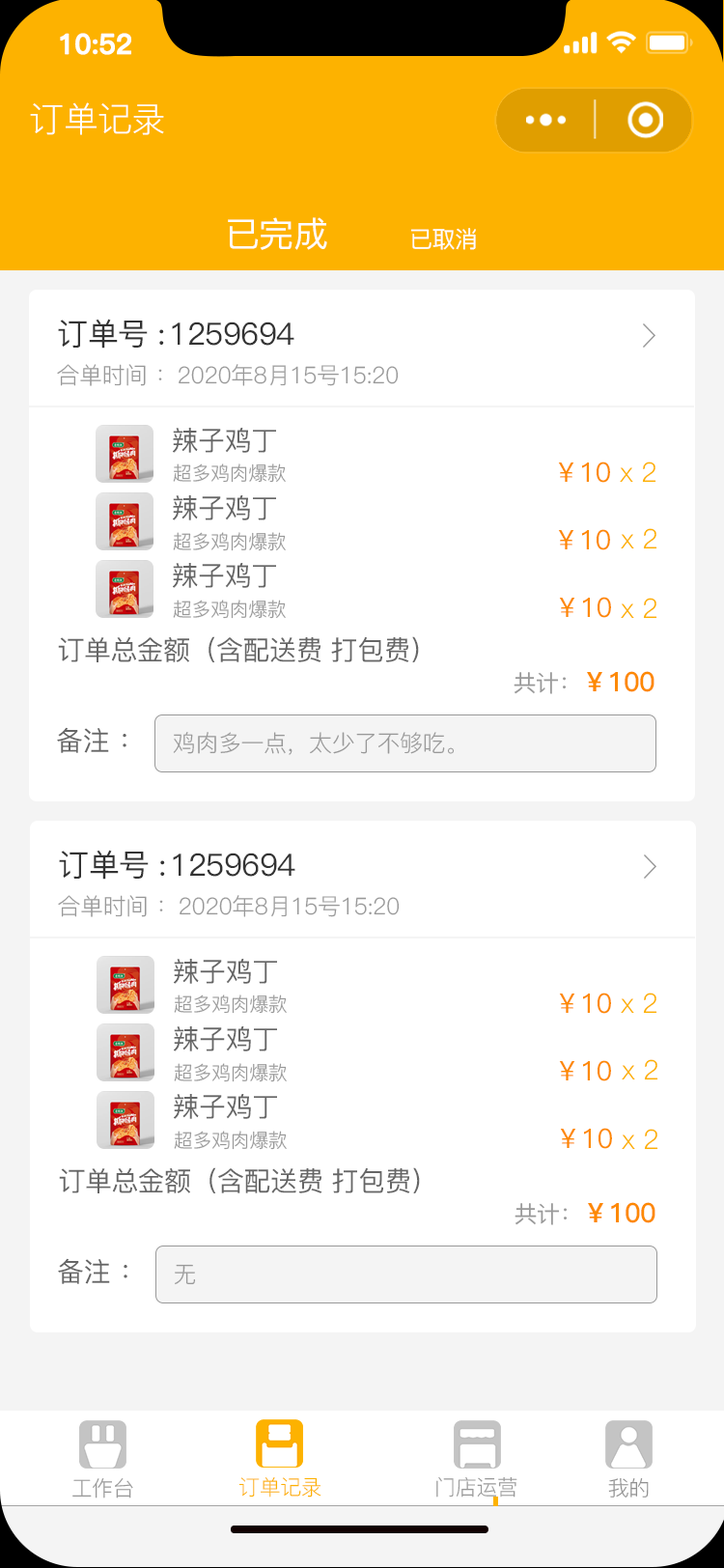
<style>
.page{position:relative;width:724px;height:1568px;background:#ffffff}
.page>*{position:absolute;margin:0}
.t1{font:27.5px "PingFang-SC-Bold";letter-spacing:-0.02em;color:#ffffff;font-weight:bold}
.t2{font:34.8px "PingFang-SC-Regular";letter-spacing:-0.02em;color:#ffffff}
.t3{font:34.8px "PingFang-SC-Medium";letter-spacing:-0.02em;color:#fefefe}
.t4{font:23.2px "PingFang-SC-Medium";letter-spacing:-0.02em;color:#fefefe}
.t5{font:30.9px "PingFang-SC-Medium";letter-spacing:-0.02em;color:#333333}
.t6{font:23.2px "PingFang-SC-Regular";letter-spacing:-0.02em;color:#999999}
.t7{font:27px "PingFang-SC-Medium";letter-spacing:-0.02em;color:#666666}
.t8{font:27px "PingFang-SC-Medium";letter-spacing:-0.02em;color:#fd8900}
.t9{font:27px "PingFang-SC-Regular";letter-spacing:-0.02em;color:#fdb100}
.t10{font:19.3px "PingFang-SC-Regular";letter-spacing:-0.02em;color:#999999}
.t11{font:27px "PingFang-SC-Bold";letter-spacing:-0.02em;color:#fd8900}
.t12{font:23.2px "PingFang-SC-Medium";letter-spacing:-0.02em;color:#999999}
.t13{font:21.2px "PingFang-SC-Regular";letter-spacing:-0.02em;color:#999999}
.t14{font:21.2px "PingFang-SC-Regular";letter-spacing:-0.02em;color:#fdb200}
.t15{font:21.2px "PingFang-SC-Regular";letter-spacing:-0.02em;color:#919191}
</style>
<div class="page">
<p class="t1" style="left:60px;top:33px;width:71px;height:22px">10:52</p>
<p class="t2" style="left:30px;top:102px;width:134px;height:33px">订单记录</p>
<p class="t3" style="left:228px;top:217px;width:99px;height:33px">已完成</p>
<p class="t4" style="left:410px;top:228px;width:66px;height:22px">已取消</p>
<p class="t5" style="left:58px;top:319px;width:106px;height:30px">订单号 :</p>
<p class="t5" style="left:172px;top:322px;width:122px;height:24px">1259694</p>
<p class="t6" style="left:57px;top:364px;width:342px;height:22px">合单时间 ：2020年8月15号15:20</p>
<p class="t7" style="left:173px;top:428px;width:103px;height:25px">辣子鸡丁</p>
<p class="t8" style="left:558px;top:462px;width:52px;height:21px">￥10</p>
<p class="t9" style="left:620px;top:462px;width:37px;height:21px">x 2</p>
<p class="t10" style="left:173px;top:463px;width:113px;height:20px">超多鸡肉爆款</p>
<p class="t7" style="left:173px;top:495px;width:103px;height:25px">辣子鸡丁</p>
<p class="t10" style="left:173px;top:532px;width:113px;height:19px">超多鸡肉爆款</p>
<p class="t8" style="left:558px;top:529px;width:52px;height:21px">￥10</p>
<p class="t9" style="left:621px;top:528px;width:37px;height:21px">x 2</p>
<p class="t7" style="left:173px;top:563px;width:103px;height:25px">辣子鸡丁</p>
<p class="t10" style="left:173px;top:600px;width:113px;height:19px">超多鸡肉爆款</p>
<p class="t8" style="left:559px;top:597px;width:52px;height:21px">￥10</p>
<p class="t9" style="left:621px;top:598px;width:37px;height:21px">x 2</p>
<p class="t7" style="left:58px;top:636px;width:361px;height:26px">订单总金额（含配送费 打包费）</p>
<p class="t11" style="left:514px;top:671px;width:141px;height:23px"><span class="t12">共计：</span>￥100</p>
<p class="t7" style="left:57px;top:727px;width:69px;height:26px">备注 ：</p>
<p class="t6" style="left:173px;top:732px;width:282px;height:23px">鸡肉多一点，太少了不够吃。</p>
<p class="t5" style="left:59px;top:850px;width:106px;height:30px">订单号 :</p>
<p class="t5" style="left:173px;top:853px;width:122px;height:24px">1259694</p>
<p class="t6" style="left:58px;top:895px;width:342px;height:22px">合单时间 ：2020年8月15号15:20</p>
<p class="t7" style="left:174px;top:959px;width:103px;height:25px">辣子鸡丁</p>
<p class="t10" style="left:174px;top:994px;width:113px;height:20px">超多鸡肉爆款</p>
<p class="t8" style="left:559px;top:993px;width:52px;height:21px">￥10</p>
<p class="t9" style="left:621px;top:993px;width:37px;height:21px">x 2</p>
<p class="t7" style="left:174px;top:1026px;width:103px;height:25px">辣子鸡丁</p>
<p class="t8" style="left:559px;top:1060px;width:52px;height:21px">￥10</p>
<p class="t9" style="left:622px;top:1059px;width:36px;height:21px">x 2</p>
<p class="t10" style="left:174px;top:1063px;width:113px;height:19px">超多鸡肉爆款</p>
<p class="t7" style="left:174px;top:1094px;width:103px;height:25px">辣子鸡丁</p>
<p class="t10" style="left:174px;top:1131px;width:113px;height:19px">超多鸡肉爆款</p>
<p class="t8" style="left:560px;top:1128px;width:52px;height:21px">￥10</p>
<p class="t9" style="left:622px;top:1129px;width:36px;height:21px">x 2</p>
<p class="t7" style="left:59px;top:1167px;width:361px;height:26px">订单总金额（含配送费 打包费）</p>
<p class="t11" style="left:515px;top:1202px;width:141px;height:23px"><span class="t12">共计：</span>￥100</p>
<p class="t7" style="left:58px;top:1258px;width:69px;height:26px">备注 ：</p>
<p class="t6" style="left:175px;top:1264px;width:21px;height:21px">无</p>
<p class="t13" style="left:72px;top:1478px;width:61px;height:20px">工作台</p>
<p class="t14" style="left:238px;top:1477px;width:84px;height:21px">订单记录</p>
<p class="t13" style="left:436px;top:1476px;width:82px;height:22px">门店运营</p>
<p class="t15" style="left:608px;top:1478px;width:41px;height:20px">我的</p>
</div>
